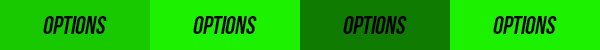
<style>
.page{position:relative;width:600px;height:50px;background:#1cf100}
.page>*{position:absolute;margin:0}
.t1{font:25.4px "BebasNeue";letter-spacing:-0.009em;color:#000000;font-style:italic}
</style>
<div class="page">
<p class="t1" style="left:43px;top:16px;width:64px;height:18px">Options</p>
<p class="t1" style="left:193px;top:16px;width:64px;height:18px">Options</p>
<p class="t1" style="left:343px;top:16px;width:64px;height:18px">Options</p>
<p class="t1" style="left:493px;top:16px;width:64px;height:18px">Options</p>
</div>
